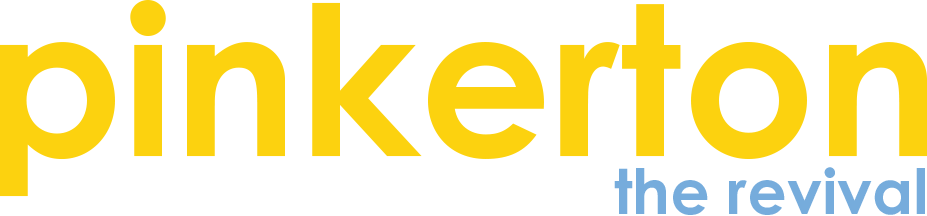
<style>
.page{position:relative;width:927px;height:216px;background:#ffffff}
.page>*{position:absolute;margin:0}
.t1{font:208.3px "CenturyGothicPro-Bold";color:#fcd20f}
.t2{font:62.5px "CenturyGothicPro-Bold";color:#76acdc}
</style>
<div class="page">
<p class="t1" style="left:0px;top:0px;width:927px;height:197px">pinkerton</p>
<p class="t2" style="left:614px;top:167px;width:311px;height:48px">the revival</p>
</div>
